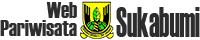
<style>
.page{position:relative;width:200px;height:40px;background:#ffffff}
.page>*{position:absolute;margin:0}
.t1{font:22px/18.7px "Haettenschweiler";color:#2d2d2d}
.t2{font:31.1px "Haettenschweiler";color:#2d2d2d;scale:0.69 1}
</style>
<div class="page">
<p class="t1" style="left:0px;top:2px;width:77px;height:34px;text-align:right">Web<br>Pariwisata</p>
<p class="t2" style="left:116px;top:7px;width:84px;height:30px">Sukabumi</p>
</div>
